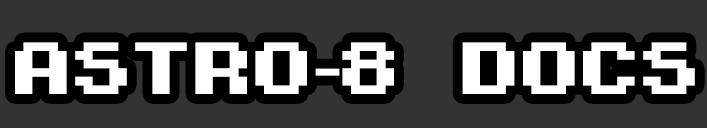
<style>
.page{position:relative;width:707px;height:128px;background:#333333}
.page>*{position:absolute;margin:0}
.t1{font:68.7px "6x6-Pixel-Font";color:#ffffff}
.t2{font:68.7px "BrickShapers";color:#ffffff}
</style>
<div class="page">
<p class="t1" style="left:15px;top:42px;width:680px;height:52px">ASTRO<span class="t2">-</span>8 DOCS</p>
</div>
